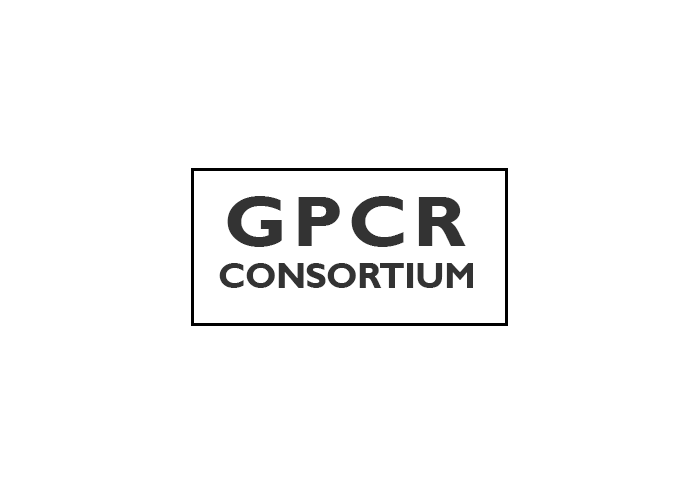
<style>
.page{position:relative;width:700px;height:500px;background:#ffffff}
.page>*{position:absolute;margin:0}
.t1{font:72px "GillSansMT-Bold";letter-spacing:0.065em;color:#333333;scale:1.08 1}
.t2{font:36px "GillSansMT-Bold";letter-spacing:-0.02em;color:#333333}
</style>
<div class="page">
<p class="t1" style="left:227px;top:196px;width:239px;height:51px">GPCR</p>
<p class="t2" style="left:219px;top:263px;width:254px;height:25px">CONSORTIUM</p>
</div>
